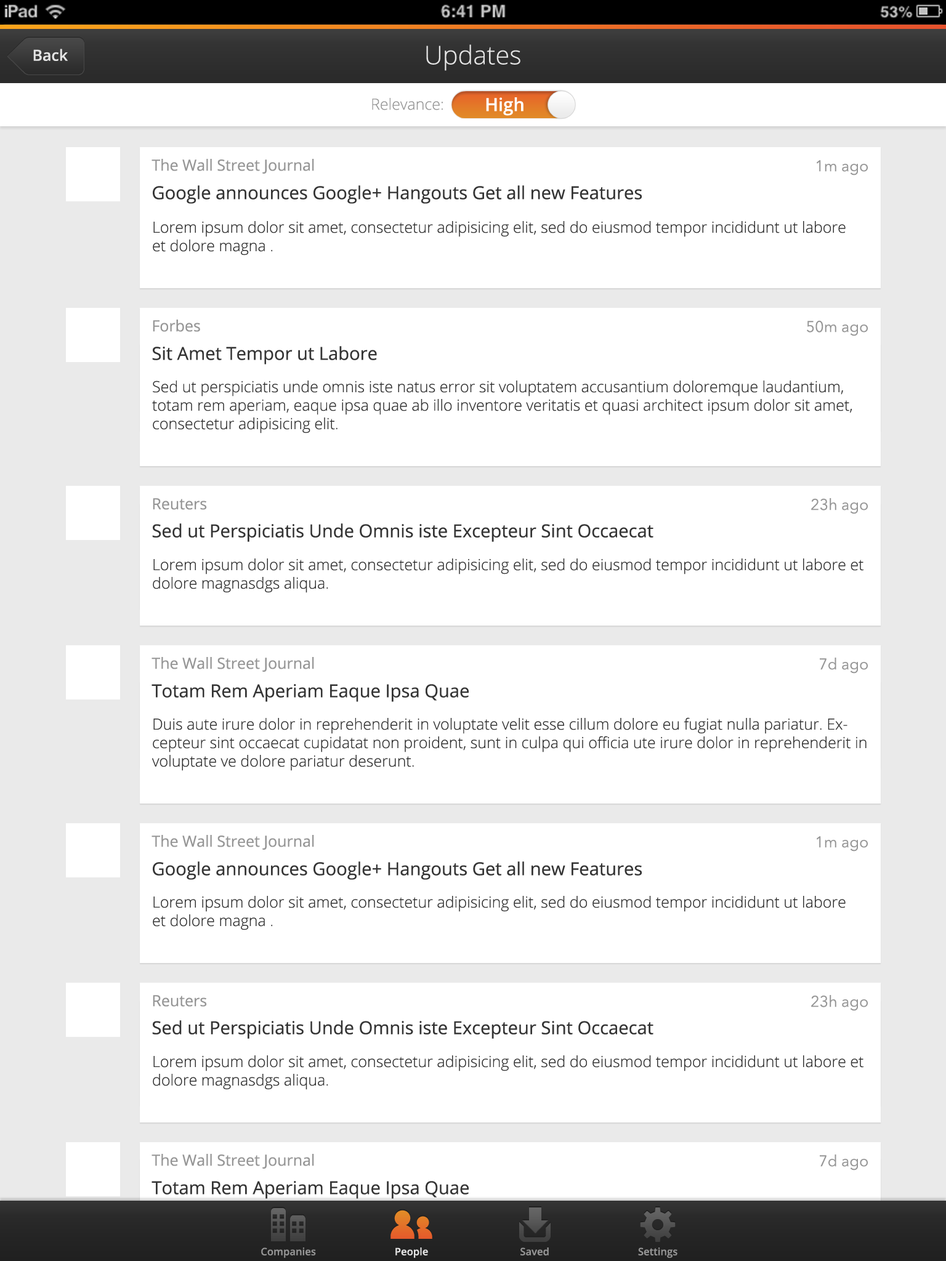
<style>
.page{position:relative;width:946px;height:1261px;background:#ffffff}
.page>*{position:absolute;margin:0}
.t1{font:15.4px "OpenSans-Semibold";color:#e5e5e5}
.t2{font:25.7px "OpenSans-Light";color:#e5e5e5}
.t3{font:15.4px "OpenSans-Light";color:#969696}
.t4{font:18px "OpenSans-Semibold";color:#ffffff}
.t5{font:18px "OpenSans";color:#343434}
.t6{font:15.4px "OpenSans";color:#969696}
.t7{font:15.4px "AvenirNext-Regular";color:#969696}
.t8{font:15.4px "OpenSans-Light";color:#343434}
.t9{font:10.3px "OpenSans-Semibold";color:#969696}
.t10{font:10.3px "OpenSans-Semibold";color:#e5e5e5}
</style>
<div class="page">
<p class="t1" style="left:33px;top:49px;width:35px;height:12px">Back</p>
<p class="t2" style="left:426px;top:44px;width:94px;height:27px">Updates</p>
<p class="t3" style="left:372px;top:98px;width:71px;height:12px">Relevance:</p>
<p class="t4" style="left:486px;top:97px;width:37px;height:19px">High</p>
<p class="t5" style="left:151px;top:159px;width:491px;height:45px"><span class="t6">The Wall Street Journal     <br></span>Google announces Google+ Hangouts Get all new Features</p>
<p class="t7" style="left:816px;top:160px;width:51px;height:15px">1m ago</p>
<p class="t8" style="left:153px;top:221px;width:692px;height:35px">Lorem ipsum dolor sit amet, consectetur adipisicing elit, sed do eiusmod tempor incididunt ut labore et dolore magna .</p>
<p class="t5" style="left:152px;top:320px;width:225px;height:44px"><span class="t6">Forbes<br></span>Sit Amet Tempor ut Labore</p>
<p class="t7" style="left:807px;top:320px;width:60px;height:16px">50m ago</p>
<p class="t8" style="left:152px;top:380px;width:700px;height:53px">Sed ut perspiciatis unde omnis iste natus error sit voluptatem accusantium doloremque laudantium, totam rem aperiam, eaque ipsa quae ab illo inventore veritatis et quasi architect ipsum dolor sit amet, consectetur adipisicing elit.</p>
<p class="t5" style="left:152px;top:498px;width:501px;height:44px"><span class="t6">Reuters<br></span>Sed ut Perspiciatis Unde Omnis iste Excepteur Sint Occaecat</p>
<p class="t7" style="left:811px;top:498px;width:56px;height:16px">23h ago</p>
<p class="t8" style="left:153px;top:558px;width:710px;height:35px">Lorem ipsum dolor sit amet, consectetur adipisicing elit, sed do eiusmod tempor incididunt ut labore et dolore magnasdgs aliqua.</p>
<p class="t5" style="left:151px;top:657px;width:318px;height:45px"><span class="t6">The Wall Street Journal<br></span>Totam Rem Aperiam Eaque Ipsa Quae</p>
<p class="t7" style="left:819px;top:658px;width:48px;height:16px">7d ago</p>
<p class="t8" style="left:152px;top:717px;width:714px;height:54px">Duis aute irure dolor in reprehenderit in voluptate velit esse cillum dolore eu fugiat nulla pariatur. Excepteur sint occaecat cupidatat non proident, sunt in culpa qui officia ute irure dolor in reprehenderit in voluptate ve dolore pariatur deserunt.</p>
<p class="t5" style="left:151px;top:835px;width:491px;height:45px"><span class="t6">The Wall Street Journal     <br></span>Google announces Google+ Hangouts Get all new Features</p>
<p class="t7" style="left:816px;top:836px;width:51px;height:15px">1m ago</p>
<p class="t8" style="left:153px;top:896px;width:692px;height:34px">Lorem ipsum dolor sit amet, consectetur adipisicing elit, sed do eiusmod tempor incididunt ut labore et dolore magna .</p>
<p class="t5" style="left:152px;top:995px;width:501px;height:44px"><span class="t6">Reuters<br></span>Sed ut Perspiciatis Unde Omnis iste Excepteur Sint Occaecat</p>
<p class="t7" style="left:811px;top:995px;width:56px;height:16px">23h ago</p>
<p class="t8" style="left:153px;top:1055px;width:710px;height:35px">Lorem ipsum dolor sit amet, consectetur adipisicing elit, sed do eiusmod tempor incididunt ut labore et dolore magnasdgs aliqua.</p>
<p class="t5" style="left:151px;top:1154px;width:318px;height:45px"><span class="t6">The Wall Street Journal<br></span>Totam Rem Aperiam Eaque Ipsa Quae</p>
<p class="t7" style="left:819px;top:1154px;width:48px;height:16px">7d ago</p>
<p class="t9" style="left:261px;top:1247px;width:55px;height:11px">Companies</p>
<p class="t10" style="left:395px;top:1247px;width:33px;height:11px">People</p>
<p class="t9" style="left:520px;top:1247px;width:29px;height:8px">Saved</p>
<p class="t9" style="left:638px;top:1247px;width:39px;height:11px">Settings</p>
</div>
